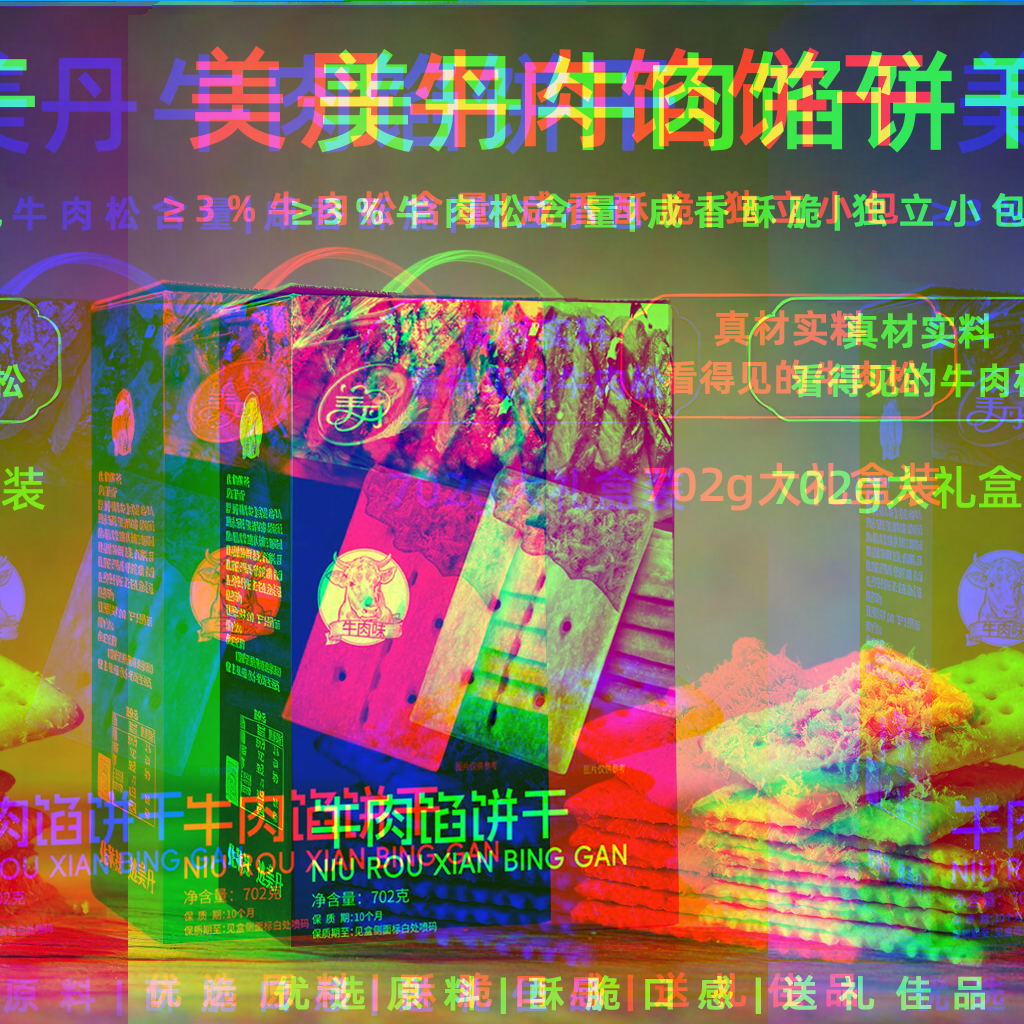
<style>
.page{position:relative;width:1024px;height:1024px}
.page>*{position:absolute;margin:0}
.t1{font:108.3px "AlibabaPuHuiTi-Medium"}
.t2{font:36.7px "AlibabaPuHuiTi-Medium";letter-spacing:0.26em;font-weight:bold}
.t3{font:38.3px "AlibabaPuHuiTi-Medium";font-weight:bold}
.t4{font:36.7px "AlibabaPuHuiTi-Medium";font-weight:bold}
.t5{font:47.5px "AlibabaPuHuiTi-Medium"}
.t6{font:37.5px "AlibabaPuHuiTi-Medium";letter-spacing:0.5em;font-weight:bold}
</style>
<div class="page">
<p class="t1" style="left:189px;top:43px;width:204px;height:105px">美丹</p>
<p class="t1" style="left:410px;top:45px;width:521px;height:103px">牛肉馅饼干</p>
<p class="t2" style="left:164px;top:188px;width:734px;height:39px">≥3%牛肉松含量|咸香酥脆|独立小包装</p>
<p class="t3" style="left:714px;top:308px;width:152px;height:37px">真材实料</p>
<p class="t4" style="left:663px;top:357px;width:259px;height:36px">看得见的牛肉松</p>
<p class="t5" style="left:644px;top:460px;width:297px;height:49px">702g大礼盒装</p>
<p class="t6" style="left:145px;top:970px;width:712px;height:39px">优选原料|酥脆口感|送礼佳品</p>
</div>
